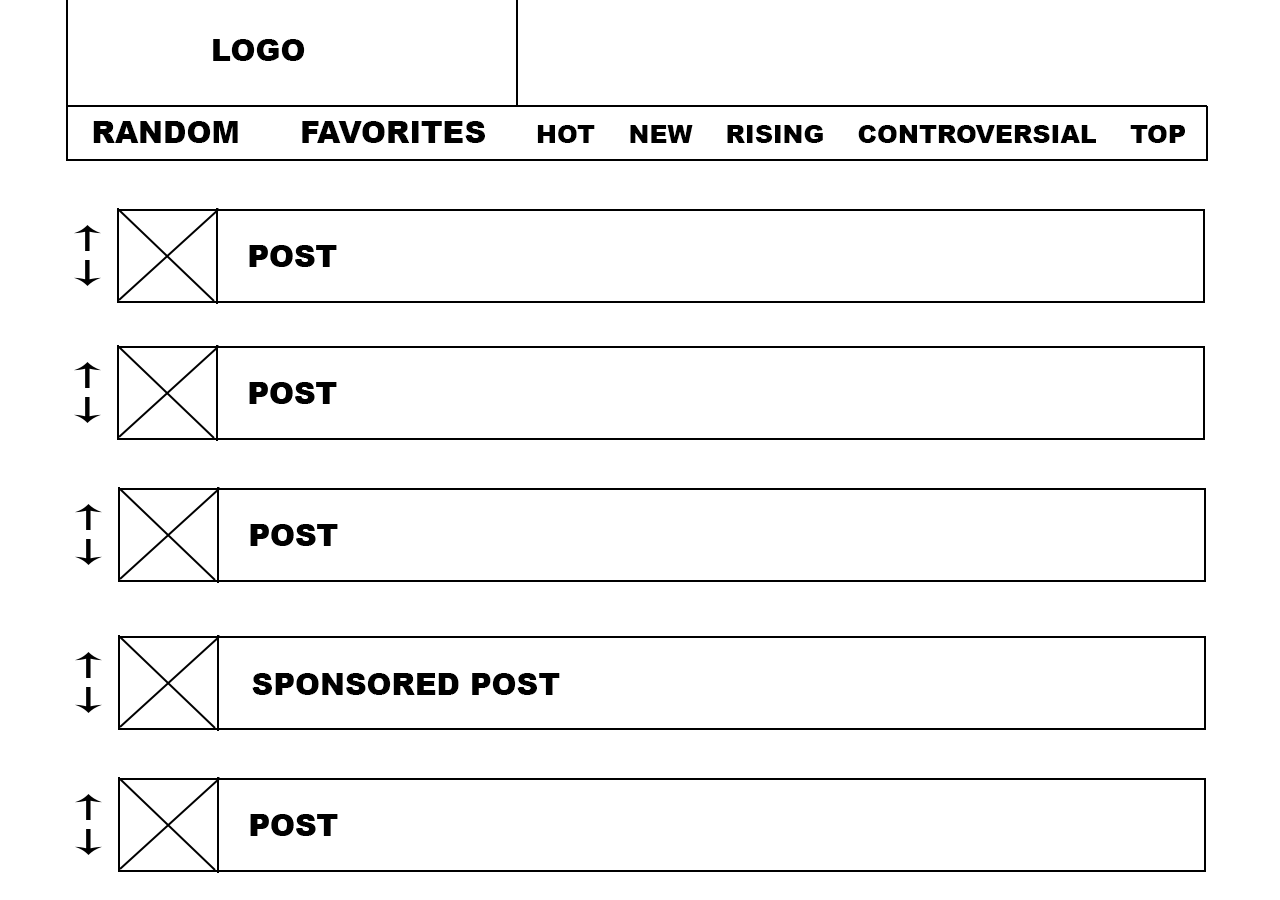
<style>
.page{position:relative;width:1280px;height:900px;background:#ffffff}
.page>*{position:absolute;margin:0}
.t1{font:30px "Arial-Black";color:#000000}
.t2{font:25px "Arial-Black";color:#000000}
</style>
<div class="page">
<p class="t1" style="left:213px;top:39px;width:92px;height:22px">LOGO</p>
<p class="t2" style="left:93px;top:121px;width:1092px;height:22px"><span class="t1">RANDOM      FAVORITES     </span>HOT    NEW    RISING    CONTROVERSIAL    TOP</p>
<p class="t1" style="left:252px;top:673px;width:308px;height:22px">SPONSORED POST</p>
</div>
